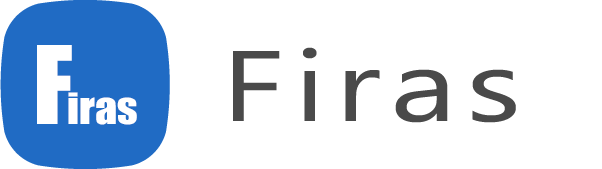
<style>
.page{position:relative;width:602px;height:169px;background:#ffffff}
.page>*{position:absolute;margin:0}
.t1{font:100px "Impact";color:#ffffff}
.t2{font:100px "MicrosoftNewTaiLue";letter-spacing:0.075em;color:#4a4a4a;scale:1.3 1}
.t3{font:40px "Impact";color:#ffffff;scale:1.1 1}
</style>
<div class="page">
<p class="t1" style="left:37px;top:45px;width:35px;height:79px">F</p>
<p class="t2" style="left:233px;top:47px;width:283px;height:76px">Firas</p>
<p class="t3" style="left:68px;top:92px;width:69px;height:33px">iras</p>
</div>
